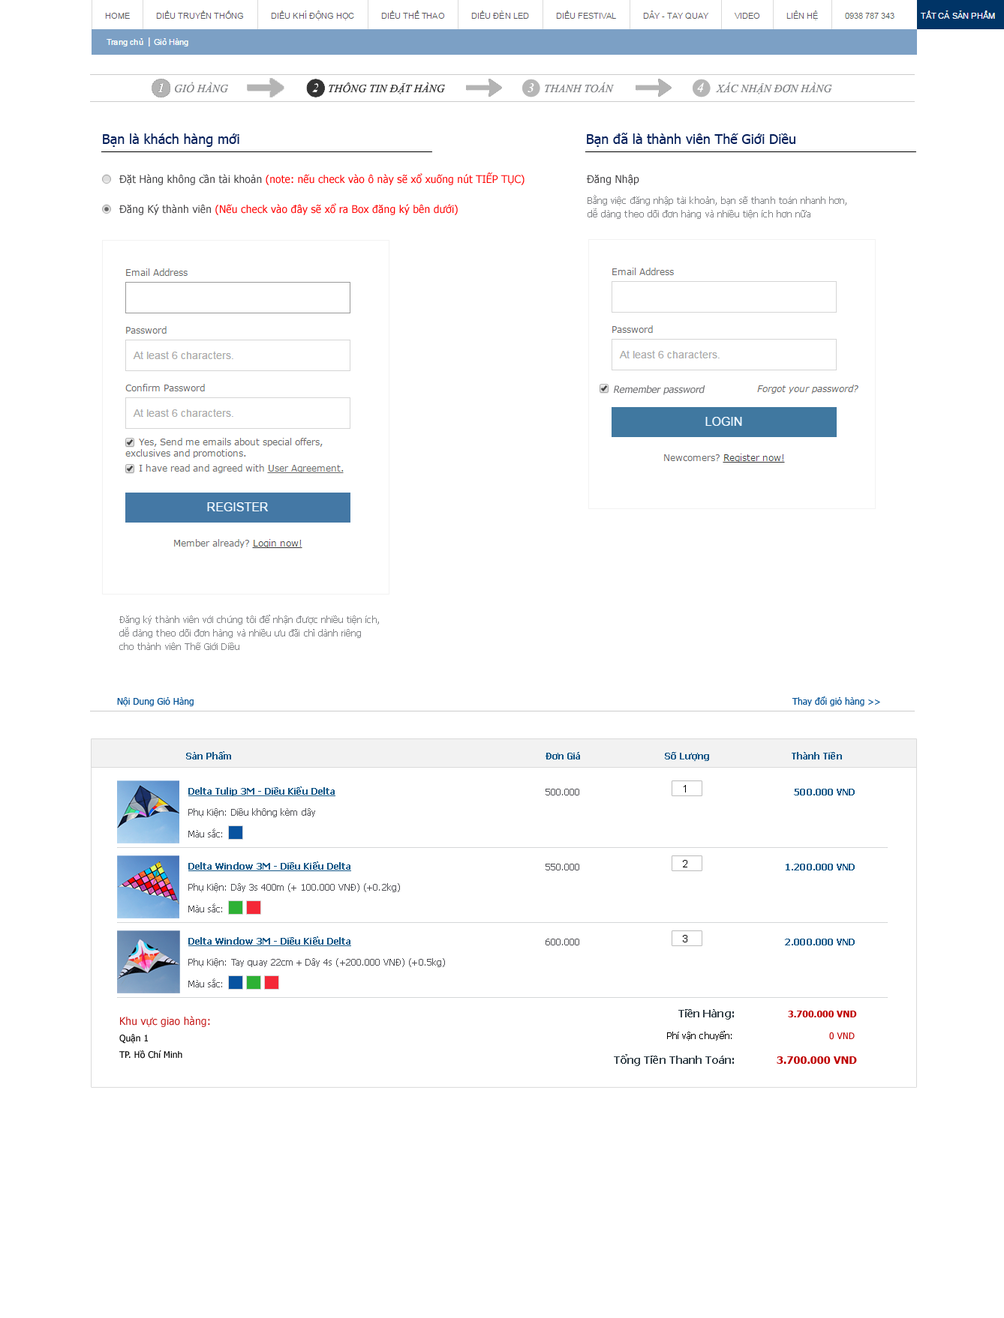
<style>
.page{position:relative;width:1004px;height:1318px;background:#ffffff}
.page>*{position:absolute;margin:0}
.t1{font:11.2px "TimesNewRomanPS-ItalicMT";letter-spacing:0.005em;color:#808285}
.t2{font:11.2px "TimesNewRomanPS-ItalicMT";letter-spacing:0.005em;color:#333333}
.t3{font:13.5px "TimesNewRomanPS-ItalicMT";letter-spacing:0.005em;color:#ffffff}
.t4{font:13.5px "Tahoma";letter-spacing:0.005em;color:#051f5a}
.t5{font:10.5px "Tahoma";letter-spacing:0.005em;color:#ff0000}
.t6{font:10.5px "Tahoma";letter-spacing:0.005em;color:#414042}
.t7{font:9px/13.5px "Tahoma";letter-spacing:0.005em;color:#808285}
.t8{font:9px "Tahoma";letter-spacing:0.005em;color:#005195}
.t9{font:9px "Tahoma-Bold";letter-spacing:0.005em;color:#125687}
.t10{font:10.5px "ArialMT";letter-spacing:0.005em;color:#000000}
.t11{font:9px "Tahoma-Bold";letter-spacing:0.005em;color:#125687;text-decoration:underline}
.t12{font:9px "Tahoma";letter-spacing:0.005em;color:#4d4e53}
.t13{font:10.5px "Tahoma-Bold";letter-spacing:0.005em;color:#36424a}
.t14{font:9px "Tahoma-Bold";letter-spacing:0.005em;color:#bf0000}
.t15{font:9px/16.5px "Tahoma";letter-spacing:0.005em;color:#000000}
.t16{font:10.5px/16.5px "Tahoma";letter-spacing:0.005em;color:#c31111}
.t17{font:9px "Tahoma";letter-spacing:0.005em;color:#000000}
.t18{font:9px "Tahoma";letter-spacing:0.005em;color:#bf0000}
.t19{font:10.5px "Tahoma-Bold";letter-spacing:0.005em;color:#bf0000}
</style>
<div class="page">
<p class="t1" style="left:175px;top:82px;width:53px;height:11px">GIỎ HÀNG</p>
<p class="t2" style="left:328px;top:82px;width:117px;height:12px">THÔNG TIN ĐẶT HÀNG</p>
<p class="t1" style="left:544px;top:82px;width:70px;height:11px">THANH TOÁN</p>
<p class="t3" style="left:697px;top:82px;width:7px;height:10px">4</p>
<p class="t1" style="left:715px;top:82px;width:117px;height:12px">XÁC NHẬN ĐƠN HÀNG</p>
<p class="t4" style="left:103px;top:134px;width:136px;height:13px">Bạn là khách hàng mới</p>
<p class="t4" style="left:586px;top:133px;width:209px;height:14px">Bạn đã là thành viên Thế Giới Diều</p>
<p class="t5" style="left:119px;top:172px;width:405px;height:13px"><span class="t6">Đặt Hàng không cần tài khoản </span>(note: nếu check vào ô này sẽ xổ xuống nút TIẾP TỤC)</p>
<p class="t6" style="left:586px;top:174px;width:53px;height:11px">Đăng Nhập</p>
<p class="t7" style="left:587px;top:195px;width:259px;height:24px">Bằng việc đăng nhập tài khoản, bạn sẽ thanh toán nhanh hơn,<br>dễ dàng theo dõi đơn hàng và nhiều tiện ích hơn nữa</p>
<p class="t5" style="left:119px;top:203px;width:339px;height:12px"><span class="t6">Đăng Ký thành viên </span>(Nếu check vào đây sẽ xổ ra Box đăng ký bên dưới)</p>
<p class="t7" style="left:119px;top:615px;width:260px;height:35px">Đăng ký thành viên với chúng tôi để nhận được nhiều tiện ích,<br>dễ dàng theo dõi đơn hàng và nhiều ưu đãi chỉ dành riêng<br>cho thành viên Thế Giới Diều</p>
<p class="t8" style="left:117px;top:698px;width:77px;height:8px">Nội Dung Giỏ Hàng</p>
<p class="t8" style="left:791px;top:697px;width:89px;height:9px">Thay đổi giỏ hàng &gt;&gt;</p>
<p class="t9" style="left:186px;top:752px;width:45px;height:8px">Sản Phẩm</p>
<p class="t9" style="left:545px;top:752px;width:35px;height:8px">Đơn Giá</p>
<p class="t9" style="left:664px;top:752px;width:45px;height:9px">Số Lượng</p>
<p class="t9" style="left:791px;top:752px;width:51px;height:8px">Thành Tiền</p>
<p class="t10" style="left:683px;top:785px;width:3px;height:8px">1</p>
<p class="t11" style="left:188px;top:787px;width:147px;height:9px">Delta Tulip 3M - Diều Kiểu Delta</p>
<p class="t12" style="left:545px;top:789px;width:34px;height:7px">500.000</p>
<p class="t9" style="left:794px;top:789px;width:60px;height:7px">500.000 VND</p>
<p class="t12" style="left:188px;top:808px;width:127px;height:10px">Phụ Kiện: Diều không kèm dây</p>
<p class="t12" style="left:188px;top:829px;width:34px;height:9px">Màu sắc:</p>
<p class="t11" style="left:188px;top:862px;width:163px;height:10px">Delta Window 3M - Diều Kiểu Delta</p>
<p class="t12" style="left:545px;top:864px;width:34px;height:7px">550.000</p>
<p class="t10" style="left:682px;top:860px;width:5px;height:8px">2</p>
<p class="t9" style="left:785px;top:864px;width:69px;height:7px">1.200.000 VND</p>
<p class="t12" style="left:188px;top:884px;width:212px;height:8px">Phụ Kiện: Dây 3s 400m (+ 100.000 VNĐ) (+0.2kg)</p>
<p class="t12" style="left:188px;top:904px;width:34px;height:9px">Màu sắc:</p>
<p class="t11" style="left:188px;top:937px;width:163px;height:9px">Delta Window 3M - Diều Kiểu Delta</p>
<p class="t12" style="left:545px;top:939px;width:34px;height:7px">600.000</p>
<p class="t10" style="left:682px;top:935px;width:5px;height:8px">3</p>
<p class="t9" style="left:784px;top:939px;width:70px;height:7px">2.000.000 VND</p>
<p class="t12" style="left:188px;top:958px;width:257px;height:10px">Phụ Kiện: Tay quay 22cm + Dây 4s (+200.000 VNĐ) (+0.5kg)</p>
<p class="t12" style="left:188px;top:979px;width:34px;height:9px">Màu sắc:</p>
<p class="t13" style="left:678px;top:1010px;width:56px;height:10px">Tiền Hàng:</p>
<p class="t14" style="left:788px;top:1011px;width:68px;height:7px">3.700.000 VND</p>
<p class="t15" style="left:119px;top:1016px;width:91px;height:43px"><span class="t16">Khu vực giao hàng:<br></span>Quận 1<br>TP. Hồ Chí Minh</p>
<p class="t17" style="left:667px;top:1031px;width:64px;height:10px">Phí vận chuyển:</p>
<p class="t18" style="left:829px;top:1033px;width:25px;height:7px">0 VND</p>
<p class="t13" style="left:614px;top:1054px;width:120px;height:12px">Tổng Tiền Thanh Toán:</p>
<p class="t19" style="left:776px;top:1057px;width:80px;height:7px">3.700.000 VND</p>
</div>
